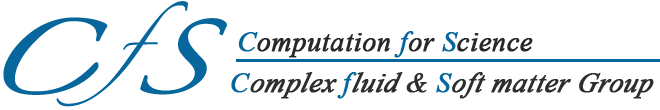
<style>
.page{position:relative;width:660px;height:110px;background:#ffffff}
.page>*{position:absolute;margin:0}
.t1{font:30.8px "Zapfino";color:#07669c;font-weight:bold;scale:1.27 1}
.t2{font:66px "Zapfino";color:#07669c;font-weight:bold;scale:1.27 1}
.t3{font:28px "TimesNewRomanPS-ItalicMT";color:#282828;font-weight:bold}
.t4{font:28px "TimesNewRomanPS-ItalicMT";color:#07669c;font-weight:bold}
.t5{font:28px "TimesNewRomanPS-ItalicMT";color:#2f2e2e;font-weight:bold;font-style:italic}
.t6{font:28px "TimesNewRomanPS-ItalicMT";color:#2f2e2e;font-weight:bold}
</style>
<div class="page">
<p class="t1" style="left:56px;top:1px;width:132px;height:106px;text-align:center">f</p>
<p class="t2" style="left:3px;top:17px;width:224px;height:78px">C S</p>
<p class="t3" style="left:238px;top:31px;width:295px;height:27px"><span class="t4">C</span>omputation <span class="t4">f</span>or <span class="t4">S</span>cience</p>
<p class="t5" style="left:231px;top:72px;width:423px;height:27px"><span class="t4">C</span>omplex <span class="t4">f</span>luid<span class="t6"> &amp; </span><span class="t4">S</span>oft matter Group</p>
</div>
